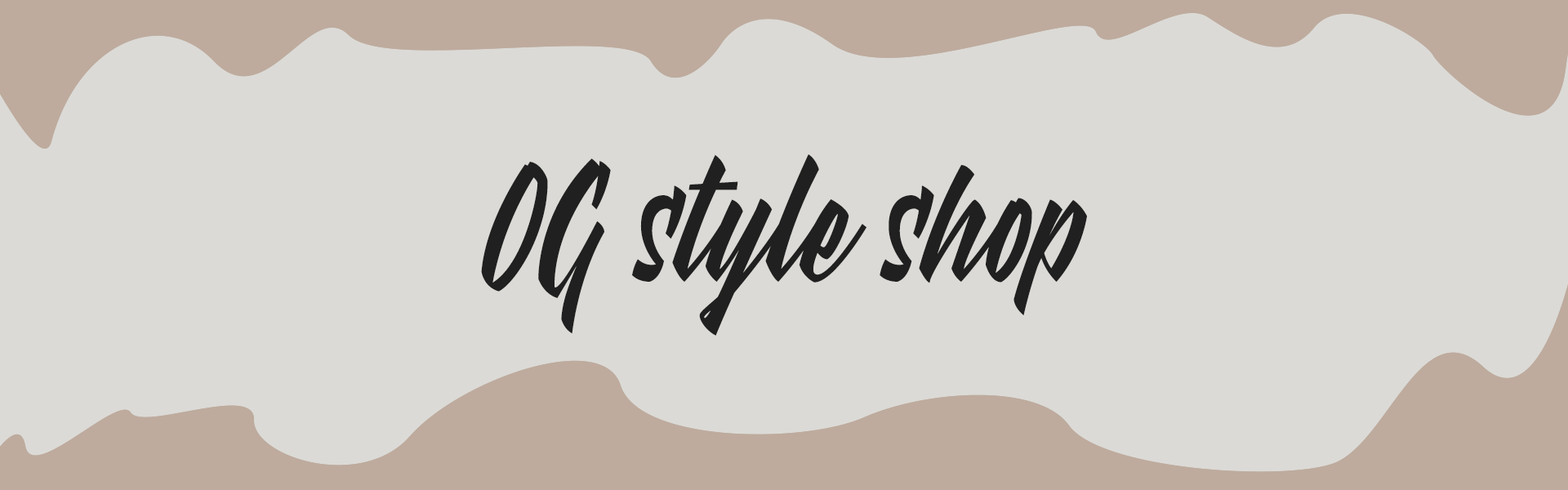
<style>
.page{position:relative;width:1568px;height:490px;background:#dbdad6}
.page>*{position:absolute;margin:0}
.t1{font:206.9px "MeatBuckets";color:#202020;scale:0.71 1}
</style>
<div class="page">
<p class="t1" style="left:481px;top:154px;width:606px;height:182px">OG style shop</p>
</div>
